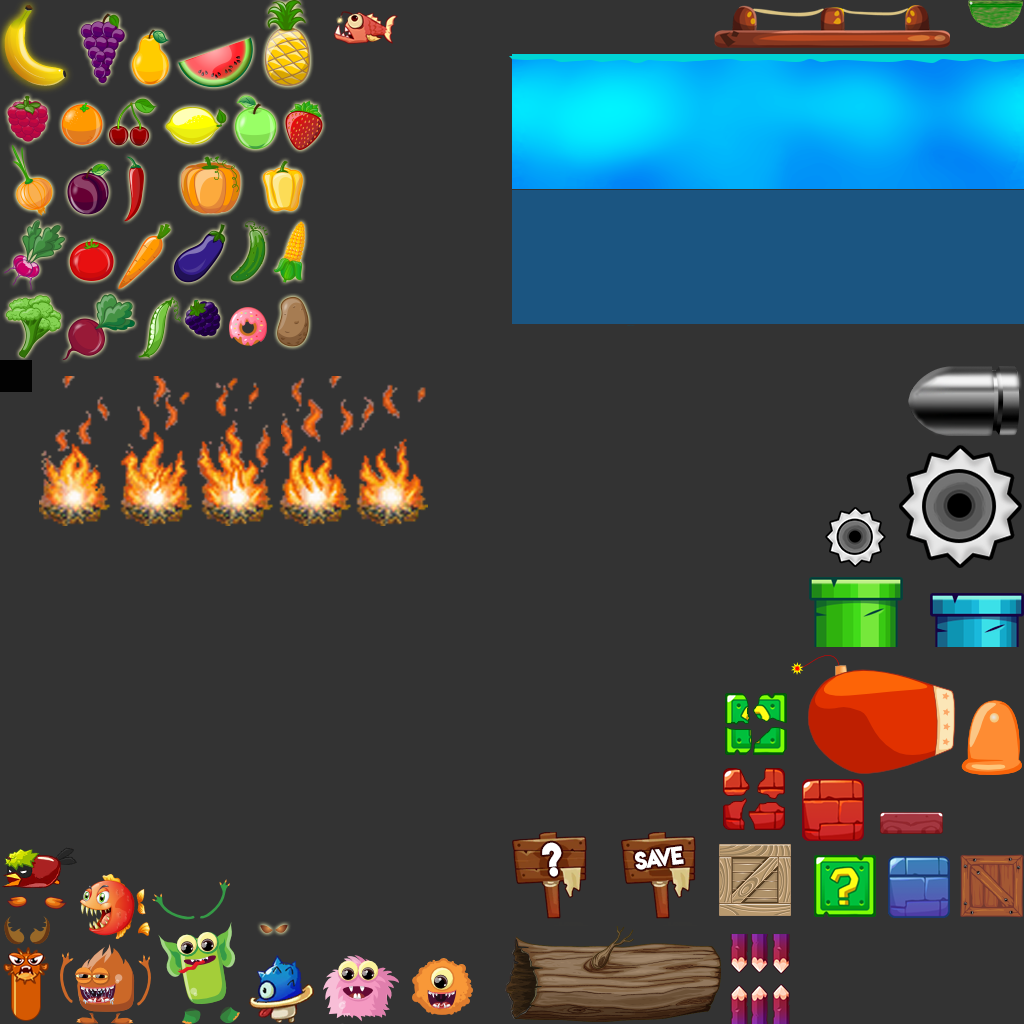
<style>
.page{position:relative;width:1024px;height:1024px;background:#333333}
.page>*{position:absolute;margin:0}
.t1{font:39.1px "LemonMilkbold";letter-spacing:-0.079em;color:#ffffff;scale:0.91 1}
.t2{font:22.3px "LemonMilkbold";letter-spacing:-0.079em;color:#ffffff;scale:0.91 1}
</style>
<div class="page">
<p class="t1" style="left:542px;top:842px;width:20px;height:35px;rotate:-7deg">?</p>
<p class="t2" style="left:635px;top:846px;width:49px;height:24px;rotate:-7deg">Save</p>
</div>
